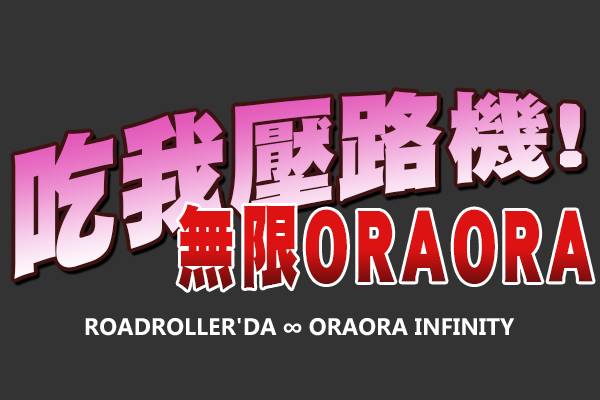
<style>
.page{position:relative;width:600px;height:400px;background:#333333}
.page>*{position:absolute;margin:0}
.t1{font:118px "DFHei-W12-WINP-BF";scale:0.93 1}
.t2{font:90px "DFHei-W12-WINP-BF";letter-spacing:0.1em;scale:0.64 1}
.t3{font:24px "Ebrima-Bold";color:#fefefe}
</style>
<div class="page">
<p class="t1" style="left:14px;top:91px;width:568px;height:188px;rotate:-8deg">吃我壓路機!</p>
<p class="t2" style="left:178px;top:204px;width:415px;height:86px">無限ORAORA</p>
<p class="t3" style="left:85px;top:318px;width:430px;height:18px">ROADROLLER'DA ∞ ORAORA INFINITY</p>
</div>
